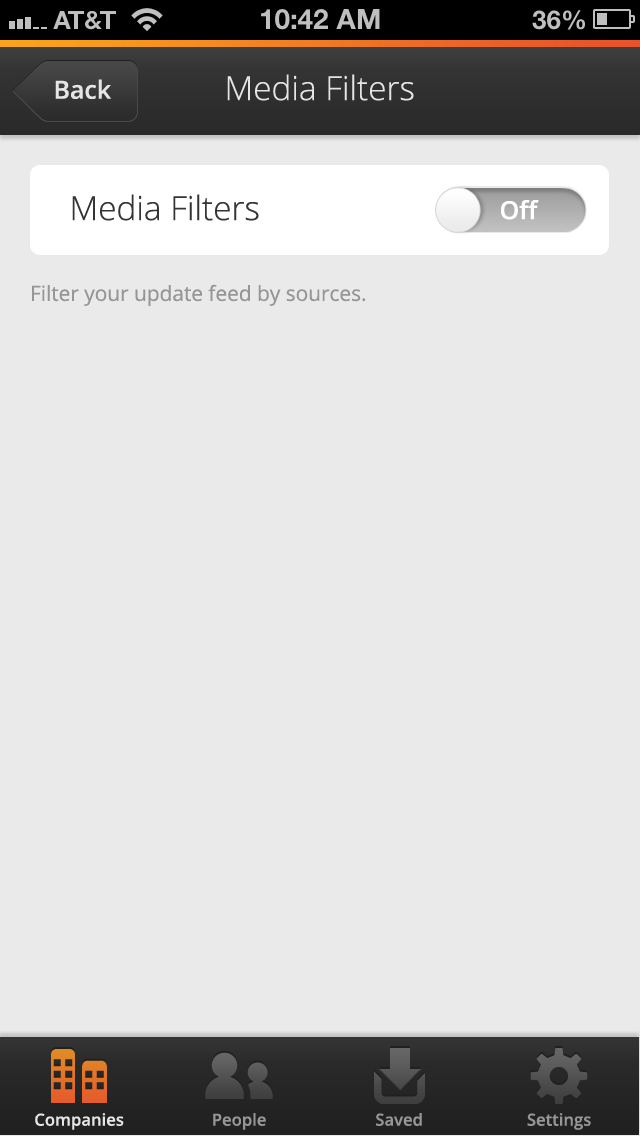
<style>
.page{position:relative;width:640px;height:1136px;background:#eaeaea}
.page>*{position:absolute;margin:0}
.t1{font:33.3px "OpenSans-Light";color:#e5e5e5}
.t2{font:25px "OpenSans-Semibold";color:#e5e5e5}
.t3{font:33.3px "OpenSans-Light";color:#343434}
.t4{font:25px "OpenSans-Semibold";color:#ffffff}
.t5{font:20.8px "OpenSans";color:#969696}
.t6{font:16.7px "OpenSans-Semibold";color:#e5e5e5}
.t7{font:16.7px "OpenSans-Semibold";color:#969696}
</style>
<div class="page">
<p class="t1" style="left:227px;top:74px;width:187px;height:27px">Media Filters</p>
<p class="t2" style="left:55px;top:79px;width:57px;height:20px">Back</p>
<p class="t3" style="left:72px;top:194px;width:187px;height:27px">Media Filters</p>
<p class="t4" style="left:501px;top:200px;width:38px;height:20px">Off</p>
<p class="t5" style="left:32px;top:284px;width:334px;height:22px">Filter your update feed by sources.</p>
<p class="t6" style="left:35px;top:1113px;width:89px;height:17px">Companies</p>
<p class="t7" style="left:213px;top:1113px;width:53px;height:17px">People</p>
<p class="t7" style="left:376px;top:1113px;width:46px;height:13px">Saved</p>
<p class="t7" style="left:527px;top:1113px;width:64px;height:17px">Settings</p>
</div>
